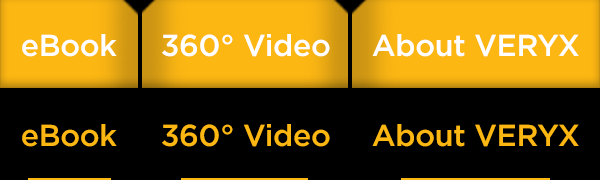
<style>
.page{position:relative;width:600px;height:180px;background:#000000}
.page>*{position:absolute;margin:0}
.t1{font:30.3px "Gotham-Medium";letter-spacing:-0.01em;color:#ffffff}
.t2{font:30.3px "Gotham-Medium";letter-spacing:-0.01em;color:#fdb713}
</style>
<div class="page">
<p class="t1" style="left:22px;top:34px;width:95px;height:23px">eBook</p>
<p class="t1" style="left:162px;top:34px;width:168px;height:23px">360° Video</p>
<p class="t1" style="left:372px;top:34px;width:207px;height:23px">About VERYX</p>
<p class="t2" style="left:22px;top:124px;width:95px;height:23px">eBook</p>
<p class="t2" style="left:162px;top:124px;width:168px;height:23px">360° Video</p>
<p class="t2" style="left:372px;top:124px;width:207px;height:23px">About VERYX</p>
</div>
